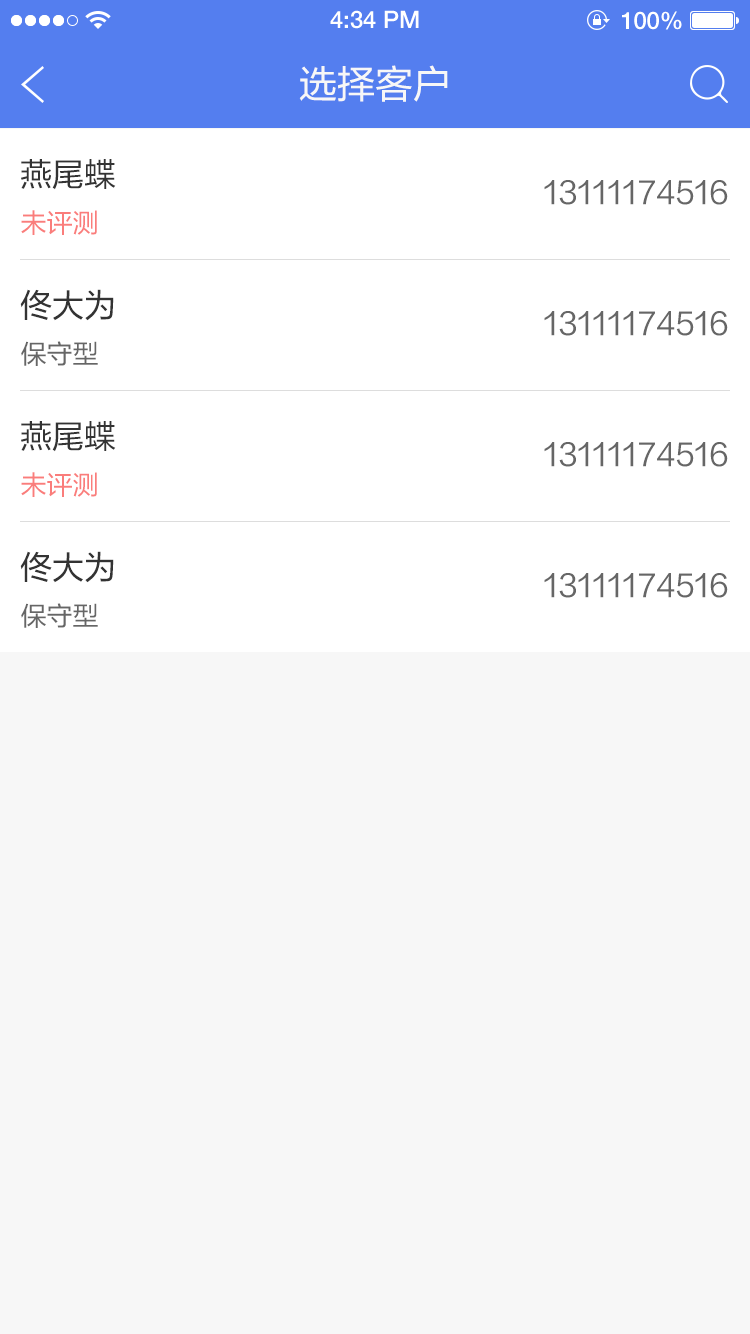
<style>
.page{position:relative;width:750px;height:1334px;background:#f7f7f7}
.page>*{position:absolute;margin:0}
.t1{font:24px "HelveticaNeueLTPro-Md";color:#ffffff}
.t2{font:38px "FZLTHJW-GB1-0";color:#f7f7f7}
.t3{font:32px "FZLTHJW-GB1-0";color:#333333}
.t4{font:30px "FZLTHJW-GB1-0";color:#666666}
.t5{font:26px "FZLTHJW-GB1-0";color:#fa7d7b}
.t6{font:26px "FZLTHJW-GB1-0";color:#666666}
</style>
<div class="page">
<p class="t1" style="left:330px;top:10px;width:89px;height:19px">4:34 PM</p>
<p class="t1" style="left:622px;top:11px;width:60px;height:19px">100%</p>
<p class="t2" style="left:299px;top:65px;width:149px;height:37px">选择客户</p>
<p class="t3" style="left:21px;top:159px;width:95px;height:31px">燕尾蝶</p>
<p class="t4" style="left:544px;top:180px;width:184px;height:25px">13111174516</p>
<p class="t5" style="left:21px;top:210px;width:76px;height:25px">未评测</p>
<p class="t3" style="left:20px;top:289px;width:94px;height:32px">佟大为</p>
<p class="t4" style="left:544px;top:311px;width:184px;height:25px">13111174516</p>
<p class="t6" style="left:21px;top:341px;width:77px;height:25px">保守型</p>
<p class="t3" style="left:21px;top:421px;width:95px;height:31px">燕尾蝶</p>
<p class="t4" style="left:544px;top:442px;width:184px;height:25px">13111174516</p>
<p class="t5" style="left:21px;top:472px;width:76px;height:25px">未评测</p>
<p class="t3" style="left:20px;top:551px;width:94px;height:32px">佟大为</p>
<p class="t4" style="left:544px;top:573px;width:184px;height:25px">13111174516</p>
<p class="t6" style="left:21px;top:603px;width:77px;height:25px">保守型</p>
</div>
